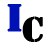
<style>
.page{position:relative;width:48px;height:48px;background:#ffffff}
.page>*{position:absolute;margin:0}
.t1{font:40px "Stencil";letter-spacing:-0.14em;color:#0011b6;font-weight:bold}
.t2{font:36px "Stencil";letter-spacing:-0.14em;color:#000000;font-weight:bold}
</style>
<div class="page">
<p class="t1" style="left:7px;top:4px;width:15px;height:28px">I</p>
<p class="t2" style="left:22px;top:16px;width:21px;height:26px">C</p>
</div>
